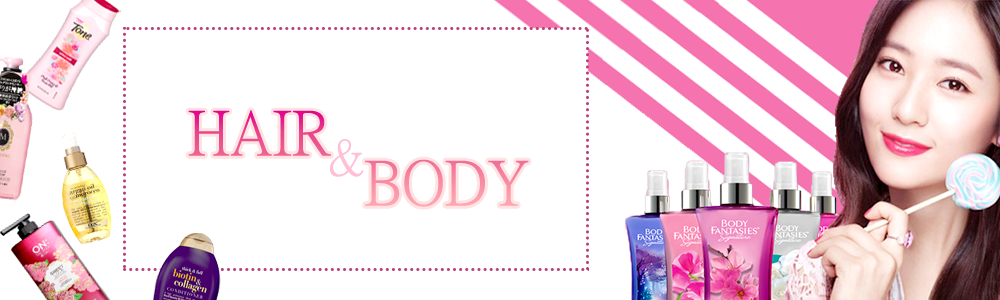
<style>
.page{position:relative;width:1000px;height:300px;background:#ffffff}
.page>*{position:absolute;margin:0}
.t1{font:62.5px/50px "PMingLiU"}
.t2{font:50px "PMingLiU";color:#ffbfd6}
</style>
<div class="page">
<p class="t1" style="left:188px;top:110px;width:341px;height:97px;text-align:center">HAIR      <br>                 BODY</p>
<p class="t2" style="left:330px;top:139px;width:34px;height:38px">&amp;</p>
</div>
